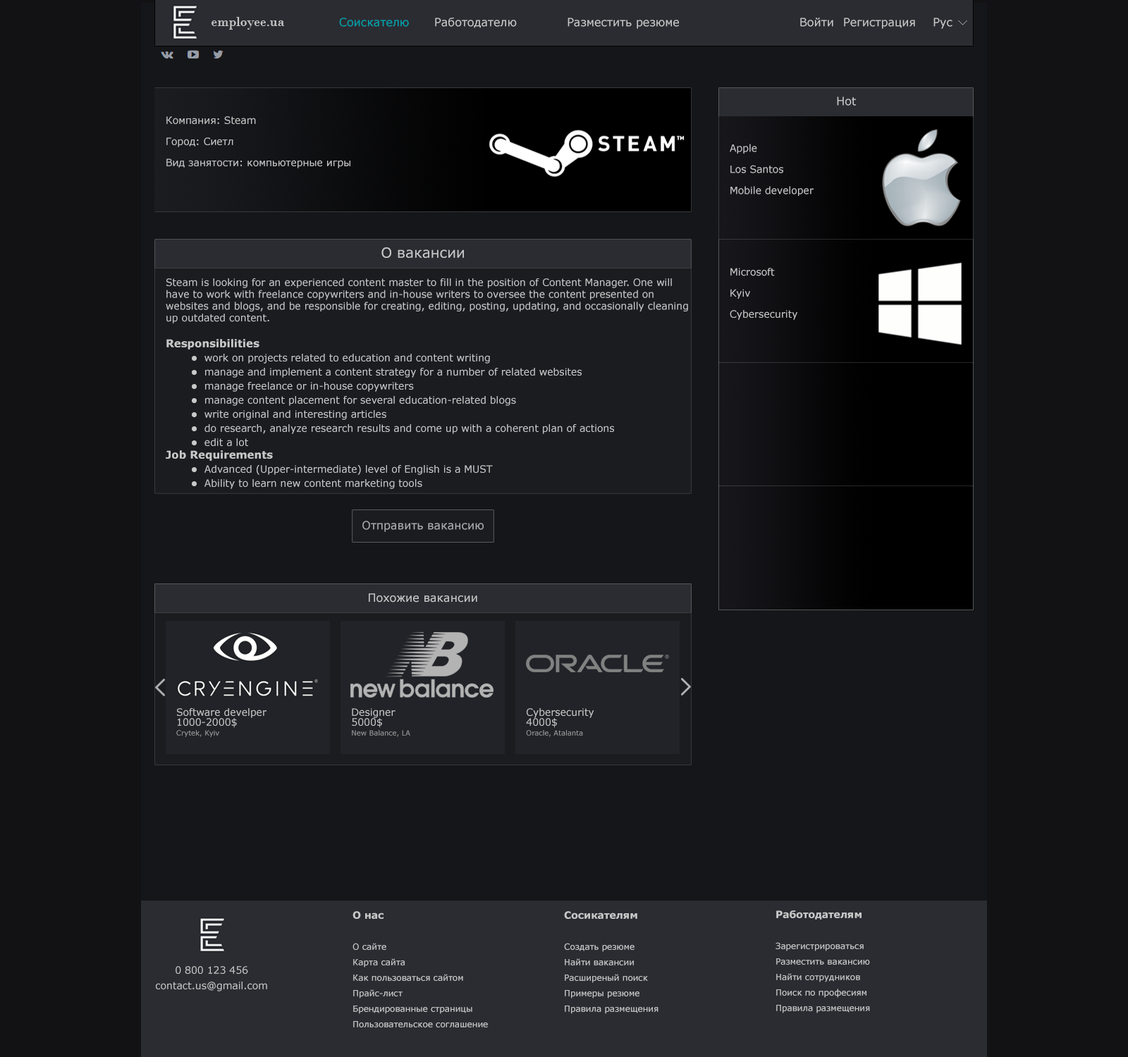
<style>
.page{position:relative;width:1128px;height:1057px;background:#121215}
.page>*{position:absolute;margin:0}
.t1{font:14.1px "BodoniMT";color:#c8c8c9}
.t2{font:11.3px "Verdana";color:#00a4af}
.t3{font:11.3px "Verdana";color:#c8c8c9}
.t4{font:9.9px/21.1px "Verdana";color:#c8c8c9}
.t5{font:14.1px "Verdana";color:#c8c8c9}
.t6{font:9.8px/21.1px "Verdana";color:#c8c8c9}
.t7{font:9.9px "Verdana";color:#c8c8c9}
.t8{font:10.6px/14.1px "Verdana-Bold";color:#c8c8c9}
.t9{font:8.5px/14.1px "Wingdings-Regular";color:#c8c8c9}
.t10{font:9.9px/14.1px "Verdana";color:#c8c8c9}
.t11{font:10.6px "Verdana-Bold";color:#c8c8c9}
.t12{font:11.3px "Verdana";color:#adadaf}
.t13{font:9.9px/9.9px "Verdana";color:#c8c8c9}
.t14{font:7px/9.9px "Verdana";color:#98989b}
.t15{font:8.5px/15.5px "Verdana";color:#c8c8c9}
.t16{font:9.9px/15.5px "Verdana-Bold";color:#c8c8c9}
.t17{font:9.9px/15.5px "Verdana";color:#c8c8c9}
</style>
<div class="page">
<p class="t1" style="left:211px;top:17px;width:73px;height:13px">employee.ua</p>
<p class="t2" style="left:339px;top:18px;width:70px;height:9px">Соискателю</p>
<p class="t3" style="left:435px;top:18px;width:82px;height:10px">Работодателю</p>
<p class="t3" style="left:567px;top:18px;width:112px;height:11px">Разместить резюме</p>
<p class="t3" style="left:800px;top:18px;width:33px;height:9px">Войти</p>
<p class="t3" style="left:844px;top:18px;width:71px;height:11px">Регистрация</p>
<p class="t3" style="left:933px;top:18px;width:19px;height:11px">Рус</p>
<p class="t3" style="left:837px;top:97px;width:19px;height:9px">Hot</p>
<p class="t4" style="left:166px;top:116px;width:184px;height:52px;text-align:right">Компания: Steam<br>Город: Сиетл<br>Вид занятости: компьютерные игры</p>
<p class="t4" style="left:730px;top:144px;width:83px;height:52px;text-align:right">Apple<br>Los Santos<br>Mobile developer</p>
<p class="t5" style="left:381px;top:247px;width:83px;height:11px">О вакансии</p>
<p class="t6" style="left:730px;top:268px;width:67px;height:52px;text-align:right">Microsoft<br>Kyiv<br>Cybersecurity</p>
<p class="t7" style="left:166px;top:278px;width:522px;height:211px;text-align:right">Steam is looking for an experienced content master to fill in the position of Content Manager. One will have to work with freelance copywriters and in-house writers to oversee the content presented on websites and blogs, and be responsible for creating, editing, posting, updating, and occasionally cleaning up outdated content.<br><br><span class="t8">Responsibilities<br></span><span class="t9"> l</span><span class="t10">  work on projects related to education and content writing<br></span><span class="t9"> l</span><span class="t10">  manage and implement a content strategy for a number of related websites<br></span><span class="t9"> l</span><span class="t10">  manage freelance or in-house copywriters<br></span><span class="t9"> l</span><span class="t10">  manage content placement for several education-related blogs<br></span><span class="t9"> l</span><span class="t10">  write original and interesting articles<br></span><span class="t9"> l</span><span class="t10">  do research, analyze research results and come up with a coherent plan of actions<br></span><span class="t9"> l</span><span class="t10">  edit a lot<br></span><span class="t11">Job Requirements<br></span><span class="t9"> l  </span>Advanced (Upper-intermediate) level of English is a MUST<br><span class="t9"> l  </span>Ability to learn new content marketing tools<br>Experience in working with web-based content execution and targeting an international audience<br>Attention to detail and extensive proofreading before every submission<br>Understanding the fundamentals of Creative and SEO copywriting<br>We offer<br>Competitive payment and bonuses<br>Free training and assistance during probation<br>Constant coaching and skill improvement training<br>Comfortable, light and cozy workspace in the city center<br>A fun, friendly and fast-paced working environment<br>Growth potential<br>Official employment</p>
<p class="t12" style="left:362px;top:521px;width:122px;height:11px">Отправить вакансию</p>
<p class="t3" style="left:369px;top:594px;width:108px;height:9px">Похожие вакансии</p>
<p class="t13" style="left:176px;top:708px;width:90px;height:29px;text-align:right">Software develper<br>1000-2000$<br><span class="t14">Crytek, Kyiv</span></p>
<p class="t14" style="left:352px;top:708px;width:58px;height:29px;text-align:right"><span class="t13">Designer<br>5000$<br></span>New Balance, LA</p>
<p class="t13" style="left:526px;top:708px;width:68px;height:29px;text-align:right">Cybersecurity<br>4000$<br><span class="t14">Oracle, Atalanta</span></p>
<p class="t15" style="left:352px;top:911px;width:136px;height:117px;text-align:right"><span class="t16">О нас<br><br></span>О сайте<br>Карта сайта<br>Как пользоваться сайтом<br>Прайс-лист<br>Брендированные страницы<br>Пользовательское соглашение</p>
<p class="t15" style="left:564px;top:911px;width:94px;height:103px;text-align:right"><span class="t16">Сосикателям<br><br></span>Создать резюме<br>Найти вакансии<br>Расширеный поиск<br>Примеры резюме<br>Правила размещения</p>
<p class="t15" style="left:775px;top:911px;width:95px;height:103px;text-align:right"><span class="t16">Работодателям<br><br></span>Зарегистрироваться<br>Разместить вакансию<br>Найти сотрудников<br>Поиск по професиям<br>Правила размещения</p>
<p class="t17" style="left:156px;top:966px;width:111px;height:26px;text-align:center">0 800 123 456<br>contact.us@gmail.com</p>
</div>
